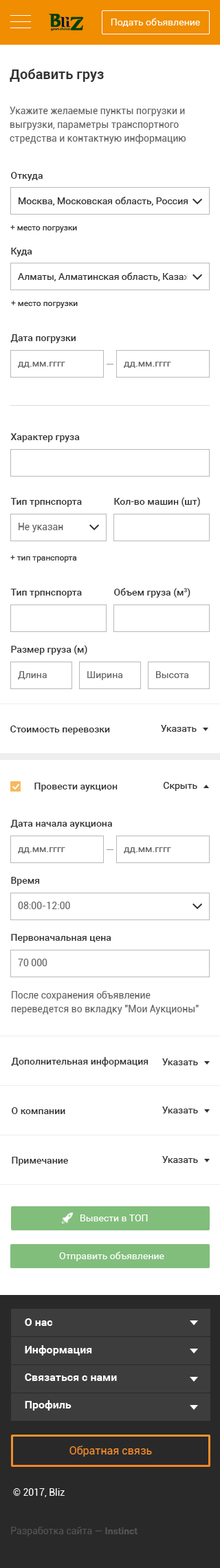
<style>
.page{position:relative;width:220px;height:1568px;background:#ffffff}
.page>*{position:absolute;margin:0}
.t1{font:13.8px "Roboto-Bold";color:#333333}
.t2{font:9.6px/13.8px "Roboto-Regular";color:#666666}
.t3{font:9.6px "Roboto-Medium";color:#333333}
.t4{font:9.6px "Roboto-Regular";color:#333333}
.t5{font:8.3px "Roboto-Regular";color:#333333}
.t6{font:9.6px "Roboto-Regular";color:#666666}
.t7{font:9.6px "Roboto-Regular";color:#ffffff}
</style>
<div class="page">
<p class="t1" style="left:10px;top:69px;width:94px;height:13px">Добавить груз</p>
<p class="t2" style="left:10px;top:107px;width:176px;height:37px">Укажите желаемые пункты погрузки и выгрузки, параметры транспортного стредства и контактную информацию</p>
<p class="t3" style="left:11px;top:172px;width:32px;height:9px">Откуда</p>
<p class="t4" style="left:19px;top:197px;width:169px;height:9px">Москва, Московская область, Россия</p>
<p class="t5" style="left:10px;top:225px;width:67px;height:7px">+ место погрузки</p>
<p class="t3" style="left:11px;top:248px;width:21px;height:9px">Куда</p>
<p class="t4" style="left:18px;top:272px;width:190px;height:9px">Алматы, Алматинская область, Казахстан</p>
<p class="t5" style="left:11px;top:301px;width:67px;height:7px">+ место погрузки</p>
<p class="t3" style="left:10px;top:334px;width:66px;height:9px">Дата погрузки</p>
<p class="t6" style="left:18px;top:362px;width:47px;height:6px">дд.мм.гггг</p>
<p class="t6" style="left:124px;top:362px;width:47px;height:6px">дд.мм.гггг</p>
<p class="t3" style="left:10px;top:433px;width:70px;height:9px">Характер груза</p>
<p class="t3" style="left:10px;top:498px;width:72px;height:9px">Тип трпнспорта</p>
<p class="t3" style="left:114px;top:497px;width:86px;height:10px">Кол-во машин (шт)</p>
<p class="t6" style="left:19px;top:523px;width:44px;height:9px">Не указан</p>
<p class="t5" style="left:10px;top:555px;width:67px;height:8px">+ тип транспорта</p>
<p class="t3" style="left:10px;top:589px;width:72px;height:9px">Тип трпнспорта</p>
<p class="t3" style="left:114px;top:588px;width:76px;height:10px">Объем груза (м3)</p>
<p class="t3" style="left:11px;top:645px;width:76px;height:10px">Размер груза (м)</p>
<p class="t6" style="left:18px;top:671px;width:29px;height:8px">Длина</p>
<p class="t6" style="left:87px;top:671px;width:36px;height:9px">Ширина</p>
<p class="t6" style="left:156px;top:671px;width:33px;height:7px">Высота</p>
<p class="t3" style="left:10px;top:726px;width:100px;height:8px">Стоимость перевозки</p>
<p class="t4" style="left:161px;top:725px;width:36px;height:7px">Указать</p>
<p class="t3" style="left:34px;top:783px;width:84px;height:9px">Провести аукцион</p>
<p class="t4" style="left:163px;top:782px;width:34px;height:9px">Скрыть</p>
<p class="t3" style="left:10px;top:820px;width:102px;height:9px">Дата начала аукциона</p>
<p class="t6" style="left:18px;top:847px;width:47px;height:6px">дд.мм.гггг</p>
<p class="t6" style="left:124px;top:847px;width:47px;height:6px">дд.мм.гггг</p>
<p class="t3" style="left:11px;top:877px;width:29px;height:9px">Время</p>
<p class="t6" style="left:18px;top:902px;width:52px;height:7px">08:00-12:00</p>
<p class="t3" style="left:11px;top:934px;width:100px;height:9px">Первоначальная цена</p>
<p class="t6" style="left:18px;top:959px;width:29px;height:7px">70 000</p>
<p class="t2" style="left:11px;top:991px;width:188px;height:23px">После сохранения объявление переведется во вкладку "Мои Аукционы"</p>
<p class="t3" style="left:11px;top:1057px;width:138px;height:10px">Дополнительная информация</p>
<p class="t4" style="left:162px;top:1058px;width:36px;height:7px">Указать</p>
<p class="t3" style="left:12px;top:1107px;width:53px;height:7px">О компании</p>
<p class="t4" style="left:162px;top:1107px;width:36px;height:6px">Указать</p>
<p class="t3" style="left:12px;top:1157px;width:56px;height:9px">Примечание</p>
<p class="t4" style="left:162px;top:1156px;width:36px;height:7px">Указать</p>
<p class="t7" style="left:80px;top:1215px;width:68px;height:6px">Вывести в ТОП</p>
<p class="t7" style="left:59px;top:1252px;width:105px;height:9px">Отправить объявление</p>
</div>
